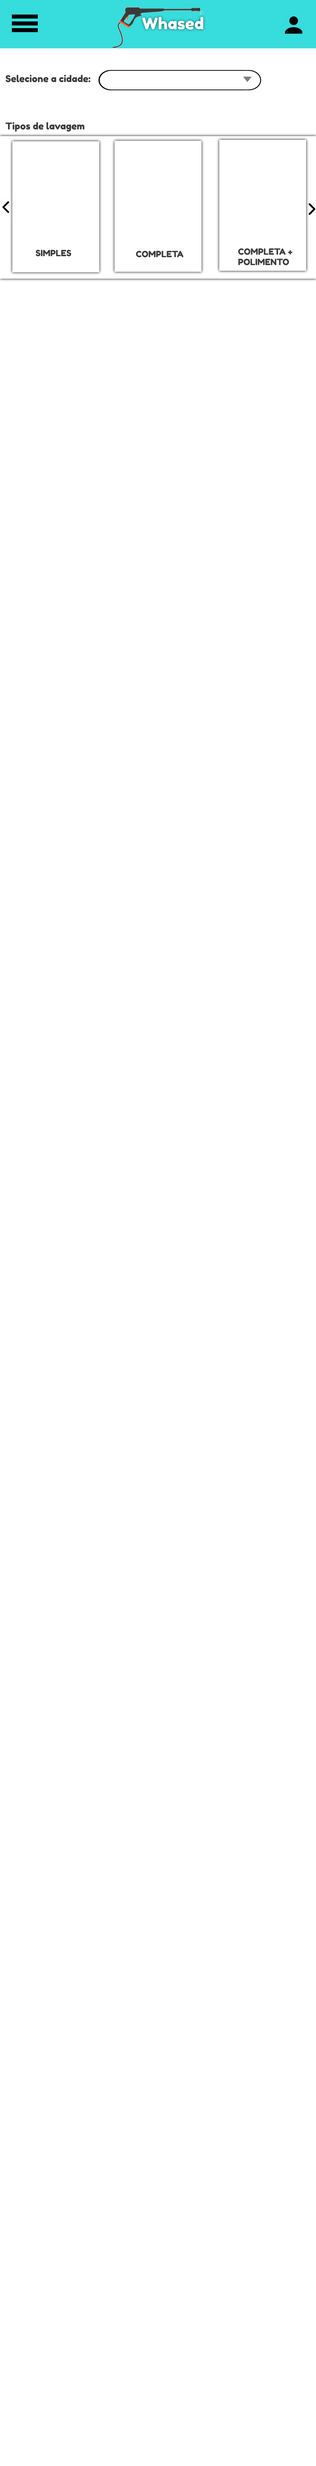
<style>
.page{position:relative;width:316px;height:2466px;background:#ffffff}
.page>*{position:absolute;margin:0}
.t1{font:16px "FredokaOne-Regular";color:#ffffff}
.t2{font:9.4px "FredokaOne-Regular";color:#3c3c3c}
.t3{font:8.6px "FredokaOne-Regular";color:#3c3c3c}
</style>
<div class="page">
<p class="t1" style="left:142px;top:17px;width:61px;height:13px">Whased</p>
<p class="t2" style="left:5px;top:75px;width:85px;height:7px">Selecione a cidade:</p>
<p class="t2" style="left:5px;top:122px;width:79px;height:10px">Tipos de lavagem</p>
<p class="t3" style="left:36px;top:250px;width:35px;height:6px">SIMPLES</p>
<p class="t3" style="left:136px;top:251px;width:47px;height:6px">COMPLETA</p>
<p class="t3" style="left:238px;top:248px;width:54px;height:17px">COMPLETA +<br>POLIMENTO</p>
</div>
